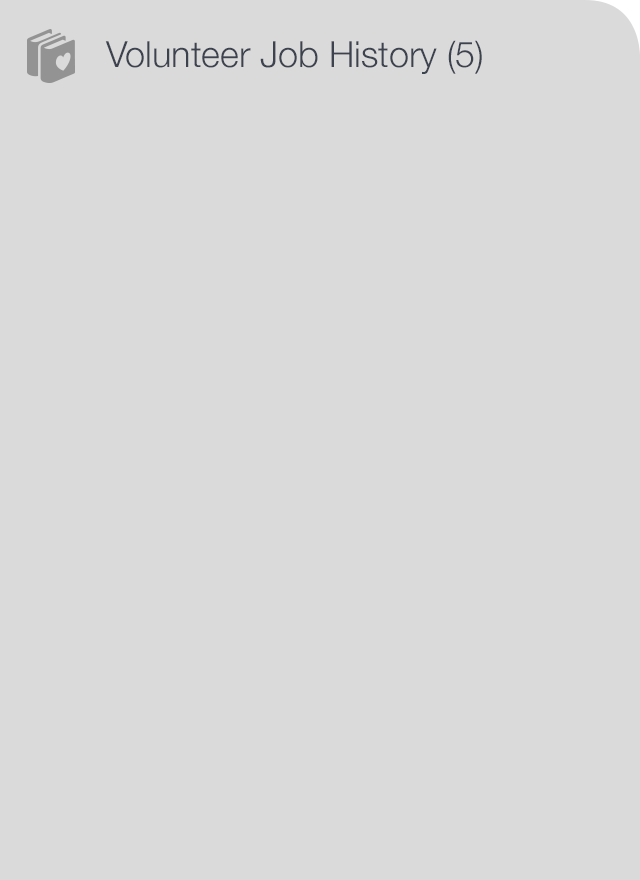
<style>
.page{position:relative;width:640px;height:880px;background:#dadada}
.page>*{position:absolute;margin:0}
.t1{font:36px "HelveticaNeue-Light";color:#3d424f}
</style>
<div class="page">
<p class="t1" style="left:105px;top:40px;width:377px;height:34px">Volunteer Job History (5)</p>
</div>
